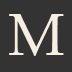
<style>
.page{position:relative;width:72px;height:72px;background:#333333}
.page>*{position:absolute;margin:0}
.t1{font:60px "PalatinoLinotype-Roman";color:#f6eee3}
</style>
<div class="page">
<p class="t1" style="left:9px;top:14px;width:55px;height:42px">M</p>
</div>
